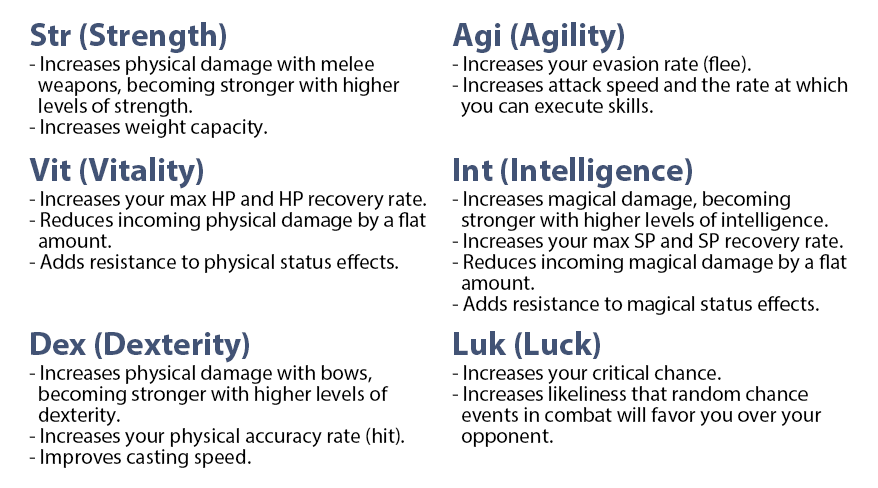
<style>
.page{position:relative;width:878px;height:488px;background:#ffffff}
.page>*{position:absolute;margin:0}
.t1{font:33px "MyriadPro-Bold";color:#425375}
.t2{font:21px/21px "MyriadPro-Regular";color:#000000}
</style>
<div class="page">
<p class="t1" style="left:30px;top:22px;width:196px;height:31px">Str (Strength)</p>
<p class="t1" style="left:452px;top:22px;width:172px;height:32px">Agi (Agility)</p>
<p class="t2" style="left:29px;top:56px;width:371px;height:82px">- Increases physical damage with melee weapons, becoming stronger with higher levels of strength.<br>- Increases weight capacity.</p>
<p class="t2" style="left:452px;top:55px;width:396px;height:62px">- Increases your evasion rate (flee).<br>- Increases attack speed and the rate at which you can execute skills.</p>
<p class="t1" style="left:29px;top:157px;width:174px;height:32px">Vit (Vitality)</p>
<p class="t1" style="left:454px;top:157px;width:238px;height:31px">Int (Intelligence)</p>
<p class="t2" style="left:29px;top:191px;width:397px;height:82px">- Increases your max HP and HP recovery rate.<br>- Reduces incoming physical damage by a flat amount.<br>- Adds resistance to physical status effects.</p>
<p class="t2" style="left:452px;top:191px;width:395px;height:124px">- Increases magical damage, becoming stronger with higher levels of intelligence.<br>- Increases your max SP and SP recovery rate.<br>- Reduces incoming magical damage by a flat amount.<br>- Adds resistance to magical status effects.</p>
<p class="t1" style="left:31px;top:332px;width:218px;height:31px">Dex (Dexterity)</p>
<p class="t1" style="left:454px;top:331px;width:146px;height:28px">Luk (Luck)</p>
<p class="t2" style="left:29px;top:365px;width:375px;height:103px">- Increases physical damage with bows, becoming stronger with higher levels of dexterity.<br>- Increases your physical accuracy rate (hit).<br>- Improves casting speed.</p>
<p class="t2" style="left:452px;top:365px;width:370px;height:82px">- Increases your critical chance.<br>- Increases likeliness that random chance events in combat will favor you over your opponent.</p>
</div>
